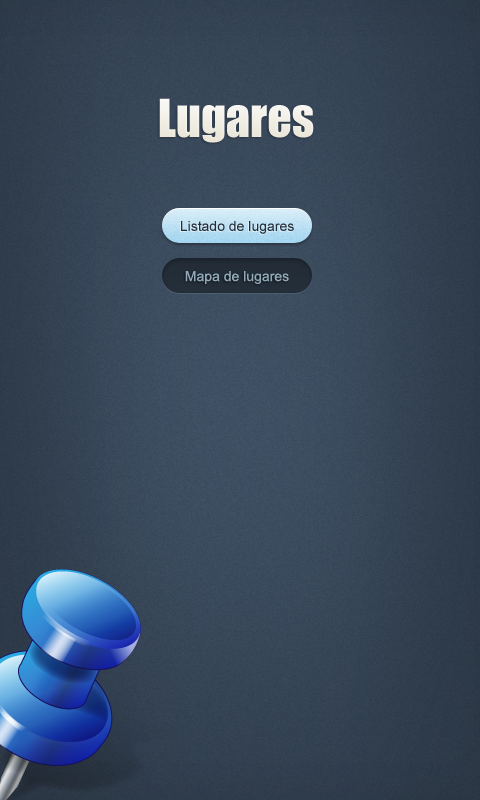
<style>
.page{position:relative;width:480px;height:800px}
.page>*{position:absolute;margin:0}
.t1{font:48.5px "Impact";color:#f1eee5}
.t2{font:14px "ArialMT";color:#2c3745}
.t3{font:14px "ArialMT";color:#92aab7}
</style>
<div class="page">
<p class="t1" style="left:159px;top:98px;width:155px;height:45px">Lugares</p>
<p class="t2" style="left:181px;top:221px;width:113px;height:13px">Listado de lugares</p>
<p class="t3" style="left:185px;top:271px;width:104px;height:13px">Mapa de lugares</p>
</div>
